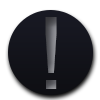
<style>
.page{position:relative;width:100px;height:100px;background:#ffffff}
.page>*{position:absolute;margin:0}
.t1{font:100px "ArialMT";letter-spacing:-0.05em}
</style>
<div class="page">
<p class="t1" style="left:45px;top:17px;width:12px;height:72px">!</p>
</div>
